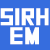
<style>
.page{position:relative;width:50px;height:50px;background:#366dde}
.page>*{position:absolute;margin:0}
.t1{font:24px/19px "SquareFont";letter-spacing:0.001em;color:#ffffff;font-weight:bold}
</style>
<div class="page">
<p class="t1" style="left:0px;top:8px;width:49px;height:37px;text-align:center">SIRH<br>EM</p>
</div>
